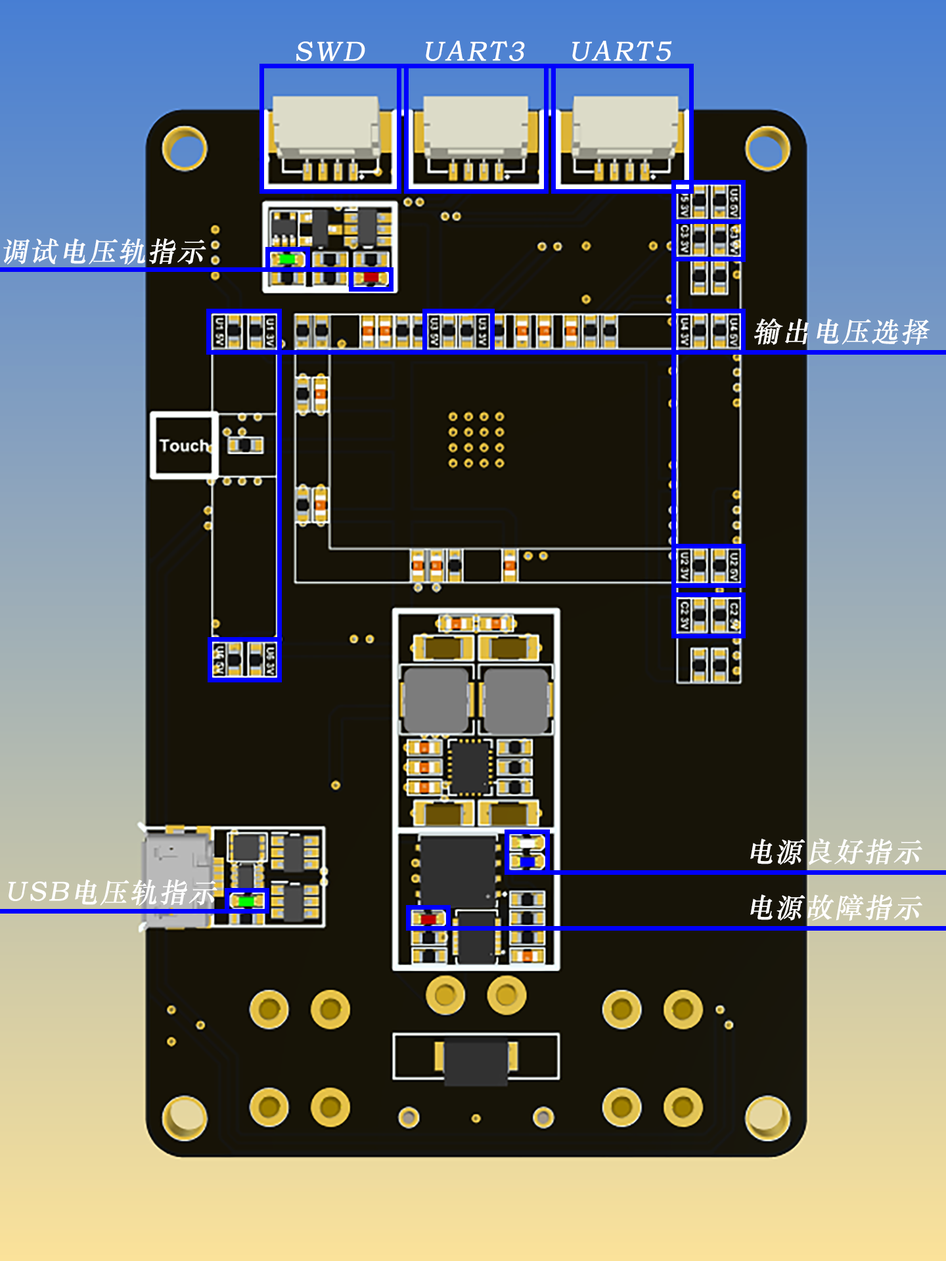
<style>
.page{position:relative;width:946px;height:1261px}
.page>*{position:absolute;margin:0}
.t1{font:27.4px "STZhongsong";letter-spacing:0.05em;color:#ffffff;font-weight:bold;font-style:italic}
</style>
<div class="page">
<p class="t1" style="left:296px;top:41px;width:69px;height:20px">SWD</p>
<p class="t1" style="left:426px;top:41px;width:99px;height:20px">UART3</p>
<p class="t1" style="left:572px;top:41px;width:100px;height:20px">UART5</p>
<p class="t1" style="left:3px;top:238px;width:203px;height:27px">调试电压轨指示</p>
<p class="t1" style="left:754px;top:318px;width:176px;height:27px">输出电压选择</p>
<p class="t1" style="left:750px;top:838px;width:172px;height:27px">电源良好指示</p>
<p class="t1" style="left:9px;top:879px;width:208px;height:27px">USB电压轨指示</p>
<p class="t1" style="left:750px;top:894px;width:172px;height:27px">电源故障指示</p>
</div>
